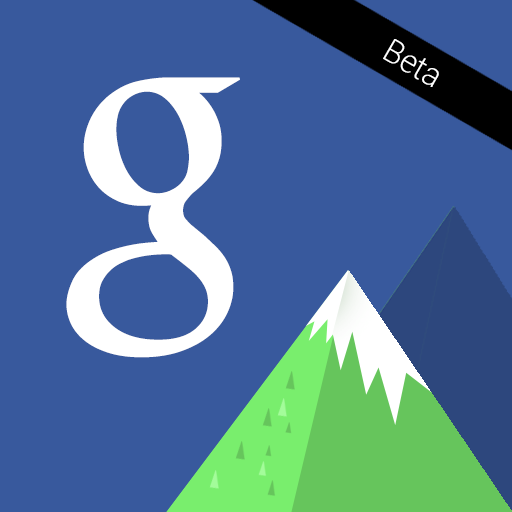
<style>
.page{position:relative;width:512px;height:512px;background:#38599d}
.page>*{position:absolute;margin:0}
.t1{font:31.8px "Roboto-Thin";color:#ffffff;font-weight:bold;scale:0.94 1}
.t2{font:364px "Catull-Regular";color:#ffffff;font-weight:bold;scale:0.95 1}
</style>
<div class="page">
<p class="t1" style="left:383px;top:39px;width:56px;height:48px;rotate:30deg">Beta</p>
<p class="t2" style="left:66px;top:77px;width:174px;height:281px">g</p>
</div>
